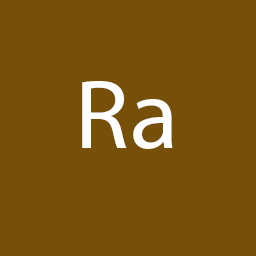
<style>
.page{position:relative;width:256px;height:256px;background:#765007}
.page>*{position:absolute;margin:0}
.t1{font:100px "MyriadPro-Regular";color:#ffffff}
</style>
<div class="page">
<p class="t1" style="left:82px;top:81px;width:91px;height:68px">Ra</p>
</div>
